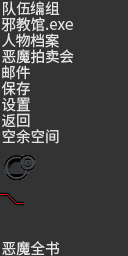
<style>
.page{position:relative;width:128px;height:256px;background:#333333}
.page>*{position:absolute;margin:0}
.t1{font:15px/16px "SourceHanSansSC-Regular";color:#e2e2e2;scale:0.97 1}
.t2{font:15px/16px "SourceHanSansSC-Regular";color:#e2e2e2}
</style>
<div class="page">
<p class="t1" style="left:1px;top:1px;width:73px;height:255px">队伍编组<br>邪教馆<span class="t2">.exe<br></span>人物档案<br>恶魔拍卖会<br>邮件<br>保存<br>设置<br>返回<br>空余空间<br><br><br><br><br><br><br>恶魔全书</p>
</div>
